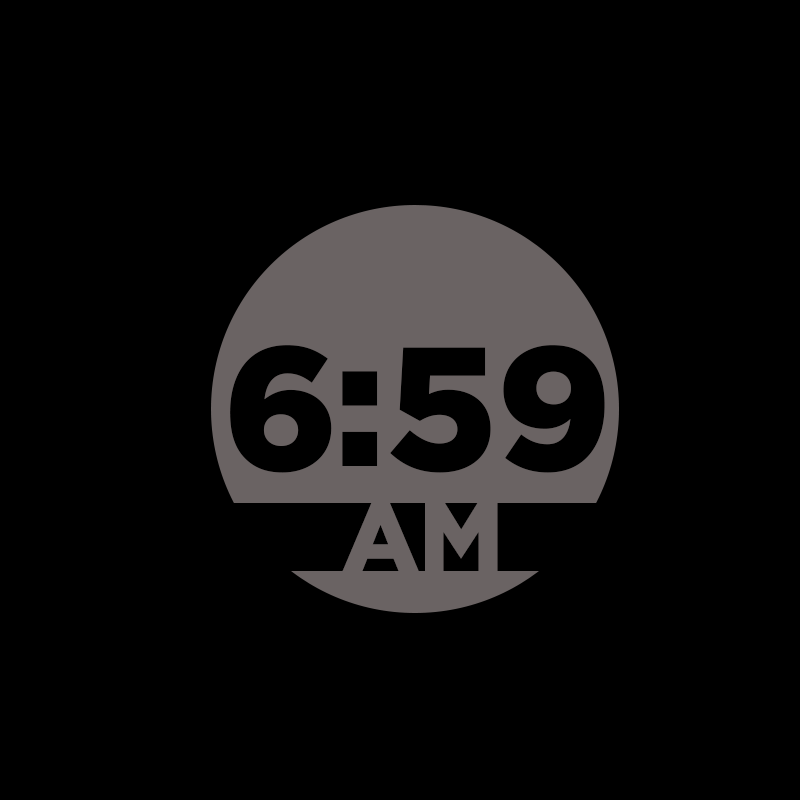
<style>
.page{position:relative;width:800px;height:800px;background:#000000}
.page>*{position:absolute;margin:0}
.t1{font:174.8px "Gotham-Black";color:#000000}
.t2{font:97.3px "Gotham-Black";color:#6a6363}
</style>
<div class="page">
<p class="t1" style="left:230px;top:345px;width:375px;height:128px">6 59</p>
<p class="t1" style="left:342px;top:371px;width:36px;height:95px">:</p>
<p class="t2" style="left:342px;top:502px;width:156px;height:69px">AM</p>
</div>
